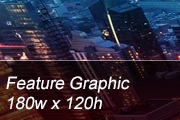
<style>
.page{position:relative;width:180px;height:120px}
.page>*{position:absolute;margin:0}
.t1{font:17px "ArialMT";color:#ffffff;font-style:italic}
</style>
<div class="page">
<p class="t1" style="left:6px;top:76px;width:124px;height:34px">Feature Graphic <br>180w x 120h</p>
</div>
